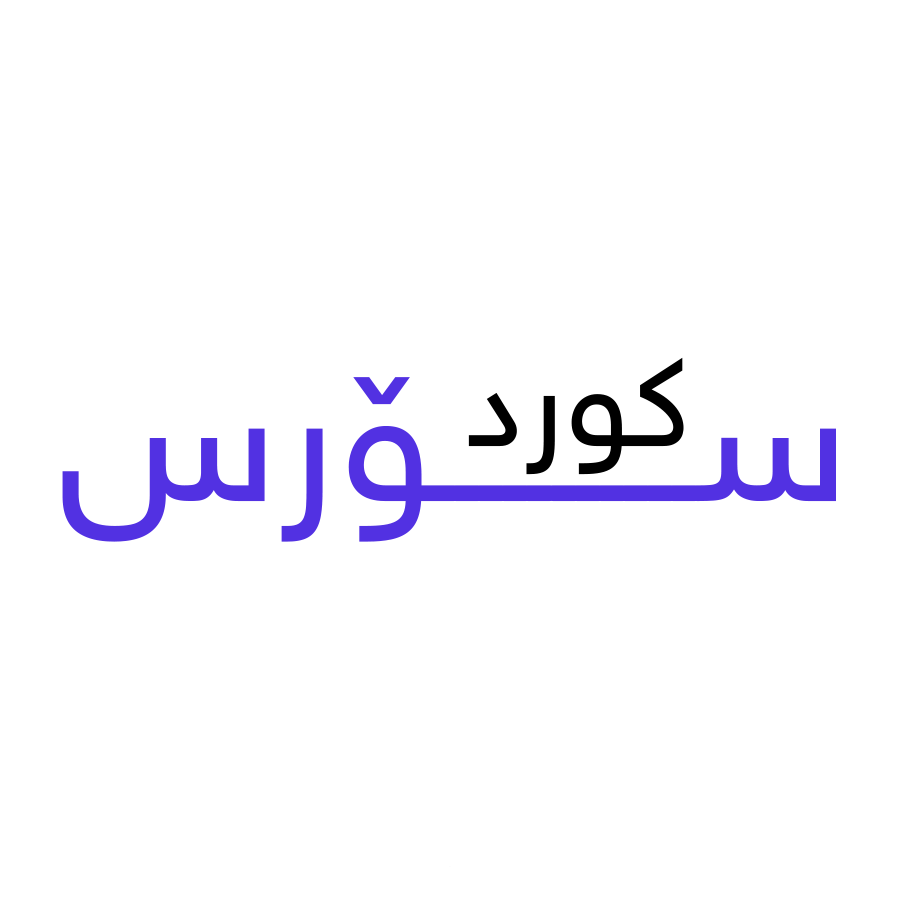
<style>
.page{position:relative;width:900px;height:900px;background:#ffffff}
.page>*{position:absolute;margin:0}
.t1{font:130px "NRTReg";color:#000000}
.t2{font:188px "NRTReg";color:#5231e2}
</style>
<div class="page">
<p class="t1" style="left:468px;top:357px;width:216px;height:118px">کورد</p>
<p class="t2" style="left:62px;top:377px;width:774px;height:165px">ســـــــــــۆرس</p>
</div>
